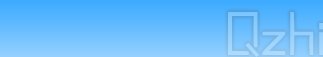
<style>
.page{position:relative;width:323px;height:57px}
.page>*{position:absolute;margin:0}
.t1{font:72px "FZZHYJW--GB1-0";color:#98d2ff}
</style>
<div class="page">
<p class="t1" style="left:228px;top:12px;width:96px;height:45px">Qzhi</p>
</div>
